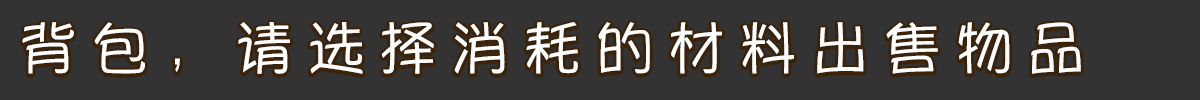
<style>
.page{position:relative;width:1200px;height:100px;background:#333333}
.page>*{position:absolute;margin:0}
.t1{font:60px "YuppySC-Regular";letter-spacing:0.2em;color:#ffffff}
</style>
<div class="page">
<p class="t1" style="left:22px;top:22px;width:1059px;height:52px">背包，请选择消耗的材料出售物品</p>
</div>
